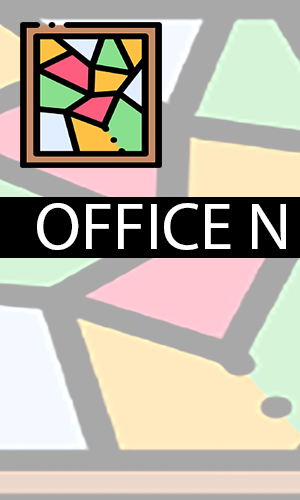
<style>
.page{position:relative;width:300px;height:500px;background:#a8a8a8}
.page>*{position:absolute;margin:0}
.t1{font:66.7px "MyriadPro-Regular";color:#ffffff}
</style>
<div class="page">
<p class="t1" style="left:37px;top:203px;width:249px;height:47px">OFFICE N</p>
</div>
